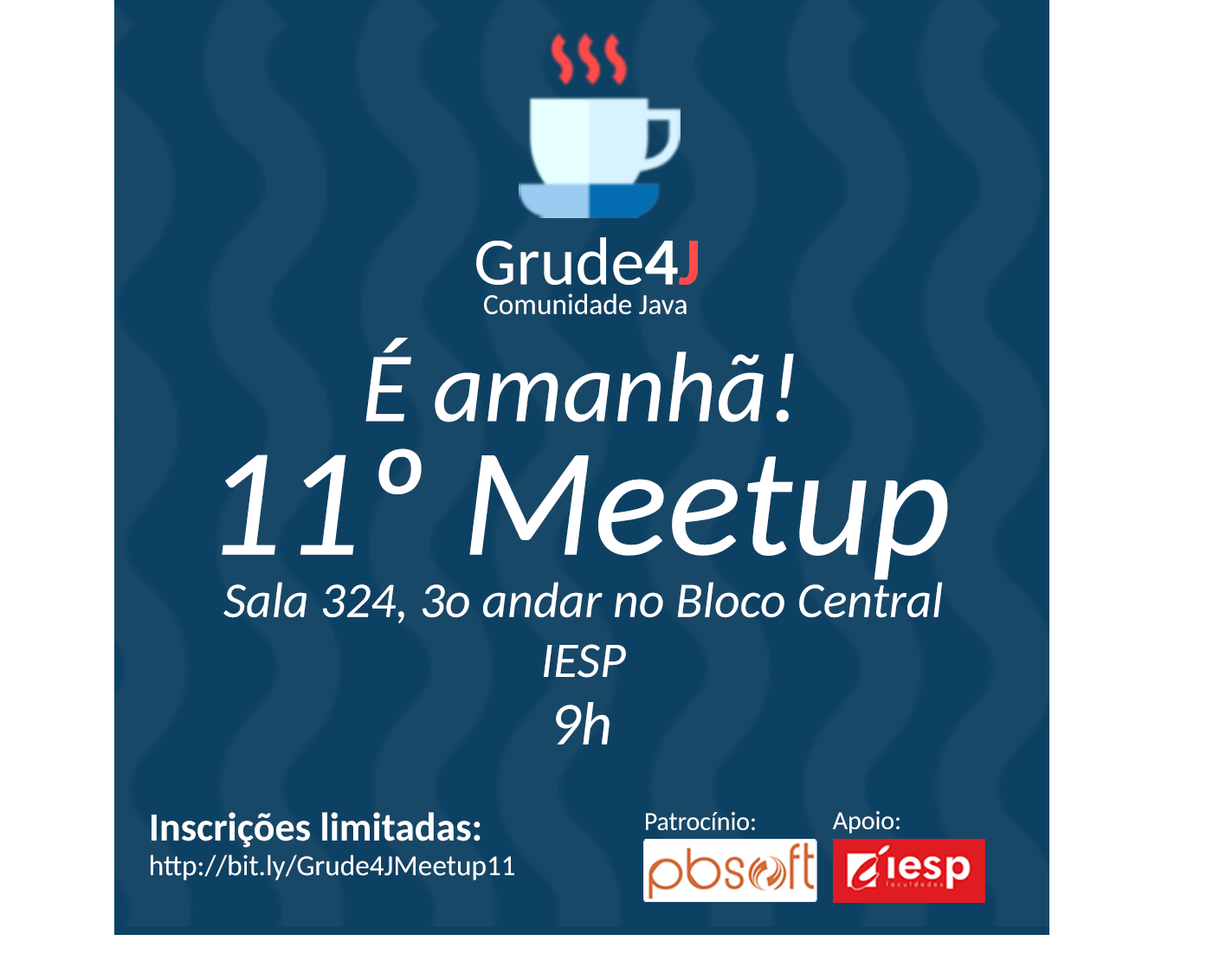
<style>
.page{position:relative;width:1226px;height:973px;background:#ffffff}
.page>*{position:absolute;margin:0}
.t1{font:67.6px "Carlito";color:#ffffff}
.t2{font:67.6px "Carlito-Bold";color:#ffffff}
.t3{font:67.6px "Carlito-Bold";color:#ff4b4a}
.t4{font:28.9px "Carlito";color:#ffffff}
.t5{font:99.6px "Carlito-Italic";color:#ffffff}
.t6{font:154.5px "Carlito-Italic";color:#ffffff}
.t7{font:49.9px "Carlito-Italic";color:#ffffff}
.t8{font:61px "Carlito-Italic";color:#ffffff}
.t9{font:39.8px "Carlito-Bold";color:#ffffff}
.t10{font:25.9px "Carlito";color:#fefefe}
.t11{font:25.9px "Carlito";color:#ffffff}
</style>
<div class="page">
<p class="t1" style="left:476px;top:237px;width:222px;height:48px">Grude<span class="t2">4</span><span class="t3">J</span></p>
<p class="t4" style="left:484px;top:293px;width:202px;height:21px">Comunidade Java</p>
<p class="t5" style="left:365px;top:338px;width:429px;height:84px">É amanhã!</p>
<p class="t6" style="left:222px;top:448px;width:726px;height:132px">11º Meetup</p>
<p class="t7" style="left:223px;top:582px;width:720px;height:96px;text-align:center">Sala 324, 3o andar no Bloco Central<br>IESP</p>
<p class="t8" style="left:556px;top:702px;width:53px;height:42px">9h</p>
<p class="t4" style="left:151px;top:812px;width:363px;height:68px"><span class="t9">Inscrições limitadas:<br></span>http://bit.ly/Grude4JMeetup11</p>
<p class="t10" style="left:646px;top:812px;width:109px;height:18px">Patrocínio:</p>
<p class="t11" style="left:832px;top:811px;width:67px;height:23px">Apoio:</p>
</div>
